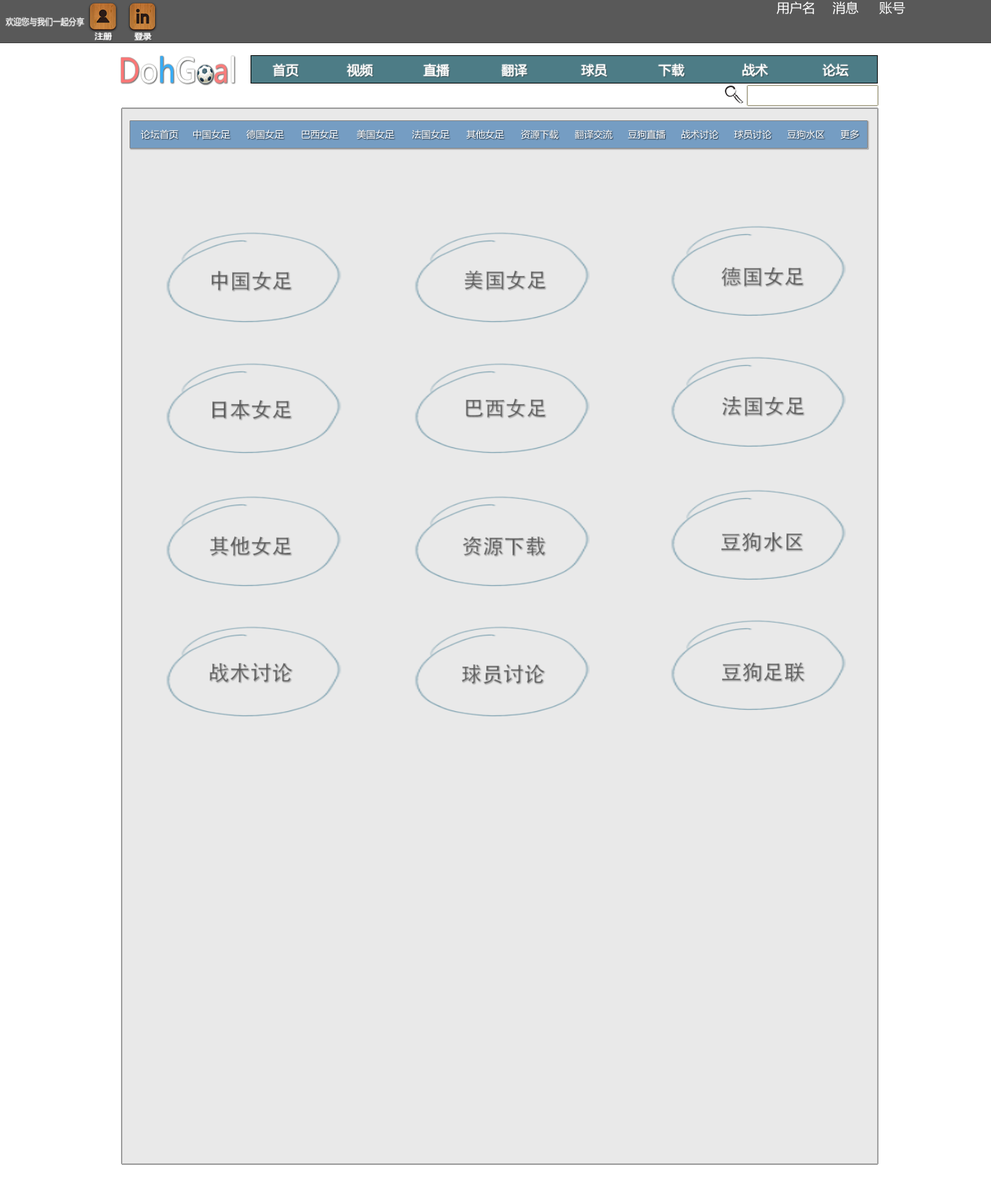
<style>
.page{position:relative;width:991px;height:1203px;background:#e9e9e9}
.page>*{position:absolute;margin:0}
.t1{font:12.9px "MicrosoftYaHei";color:#ffffff}
.t2{font:9.1px "MicrosoftYaHei";color:#ffffff;scale:0.87 1}
.t3{font:8px "MicrosoftYaHei";color:#ffffff;scale:1.05 1}
.t4{font:9.4px "MicrosoftYaHei";color:#ffffff}
.t5{font:21.1px "AdobeHeitiStd-Regular";color:#777777}
.t6{font:21.1px "AdobeHeitiStd-Regular";color:#757575}
.t7{font:21.1px "AdobeHeitiStd-Regular";color:#727272}
.t8{font:21.1px "AdobeHeitiStd-Regular";color:#737373}
.t9{font:21.1px "AdobeHeitiStd-Regular";color:#717171}
</style>
<div class="page">
<p class="t1" style="left:776px;top:1px;width:38px;height:13px">用户名</p>
<p class="t1" style="left:832px;top:1px;width:27px;height:13px">消息</p>
<p class="t1" style="left:879px;top:1px;width:26px;height:13px">账号</p>
<p class="t2" style="left:6px;top:17px;width:78px;height:10px">欢迎您与我们一起分享</p>
<p class="t3" style="left:95px;top:32px;width:17px;height:8px">注册</p>
<p class="t3" style="left:134px;top:33px;width:17px;height:7px">登录</p>
<p class="t1" style="left:273px;top:64px;width:26px;height:13px">首页</p>
<p class="t1" style="left:347px;top:64px;width:26px;height:13px">视频</p>
<p class="t1" style="left:423px;top:64px;width:26px;height:13px">直播</p>
<p class="t1" style="left:501px;top:64px;width:26px;height:12px">翻译</p>
<p class="t1" style="left:581px;top:64px;width:26px;height:12px">球员</p>
<p class="t1" style="left:658px;top:64px;width:26px;height:12px">下载</p>
<p class="t1" style="left:743px;top:64px;width:25px;height:12px">战术</p>
<p class="t1" style="left:822px;top:64px;width:27px;height:12px">论坛</p>
<p class="t4" style="left:141px;top:130px;width:37px;height:9px">论坛首页</p>
<p class="t4" style="left:193px;top:130px;width:37px;height:9px">中国女足</p>
<p class="t4" style="left:246px;top:130px;width:38px;height:9px">德国女足</p>
<p class="t4" style="left:302px;top:130px;width:36px;height:9px">巴西女足</p>
<p class="t4" style="left:357px;top:130px;width:37px;height:9px">美国女足</p>
<p class="t4" style="left:412px;top:130px;width:37px;height:9px">法国女足</p>
<p class="t4" style="left:466px;top:130px;width:38px;height:9px">其他女足</p>
<p class="t4" style="left:521px;top:130px;width:37px;height:9px">资源下载</p>
<p class="t4" style="left:575px;top:130px;width:37px;height:9px">翻译交流</p>
<p class="t4" style="left:628px;top:130px;width:37px;height:9px">豆狗直播</p>
<p class="t4" style="left:681px;top:130px;width:37px;height:9px">战术讨论</p>
<p class="t4" style="left:734px;top:130px;width:38px;height:9px">球员讨论</p>
<p class="t4" style="left:787px;top:130px;width:38px;height:9px">豆狗水区</p>
<p class="t4" style="left:840px;top:130px;width:19px;height:9px">更多</p>
<p class="t5" style="left:721px;top:267px;width:82px;height:20px">德国女足</p>
<p class="t6" style="left:211px;top:270px;width:81px;height:21px">中国女足</p>
<p class="t5" style="left:464px;top:270px;width:82px;height:20px">美国女足</p>
<p class="t7" style="left:212px;top:399px;width:80px;height:21px">日本女足</p>
<p class="t7" style="left:466px;top:399px;width:80px;height:19px">巴西女足</p>
<p class="t6" style="left:722px;top:396px;width:82px;height:20px">法国女足</p>
<p class="t8" style="left:721px;top:532px;width:82px;height:20px">豆狗水区</p>
<p class="t8" style="left:210px;top:536px;width:82px;height:20px">其他女足</p>
<p class="t5" style="left:462px;top:537px;width:83px;height:19px">资源下载</p>
<p class="t9" style="left:210px;top:663px;width:82px;height:20px">战术讨论</p>
<p class="t6" style="left:462px;top:664px;width:83px;height:20px">球员讨论</p>
<p class="t6" style="left:722px;top:662px;width:82px;height:20px">豆狗足联</p>
</div>
